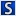
<style>
.page{position:relative;width:16px;height:16px;background:#e0e0e0}
.page>*{position:absolute;margin:0}
.t1{font:15.3px "AdobeGothicStd-Bold";color:#e0e0e0}
</style>
<div class="page">
<p class="t1" style="left:4px;top:2px;width:8px;height:13px">S</p>
</div>
